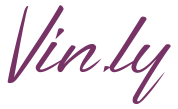
<style>
.page{position:relative;width:178px;height:109px;background:#ffffff}
.page>*{position:absolute;margin:0}
.t1{font:144px "Strikeyour-Path";color:#773366}
</style>
<div class="page">
<p class="t1" style="left:7px;top:5px;width:164px;height:99px">Vin.ly</p>
</div>
